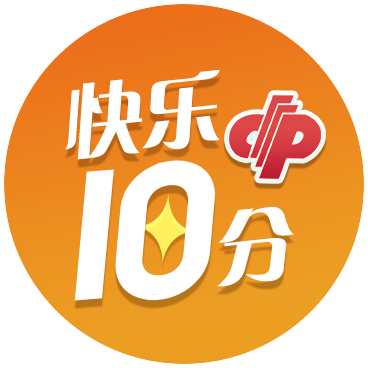
<style>
.page{position:relative;width:368px;height:368px;background:#ffffff}
.page>*{position:absolute;margin:0}
.t1{font:80px "GJJCQJW--GB1-0";letter-spacing:-0.025em;color:#ffffff;font-style:italic}
.t2{font:80px "GJJCQJW--GB1-0";letter-spacing:-0.05em;color:#ffffff;font-style:italic}
</style>
<div class="page">
<p class="t1" style="left:65px;top:69px;width:155px;height:91px;rotate:-6deg">快乐</p>
<p class="t2" style="left:217px;top:206px;width:77px;height:81px;rotate:-6deg">分</p>
</div>
